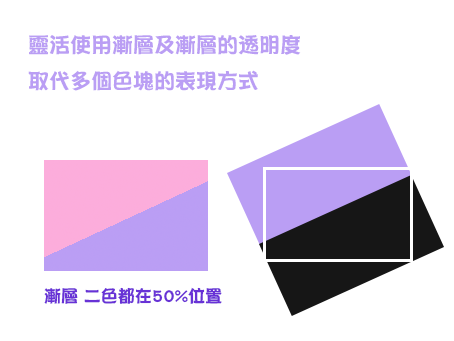
<style>
.page{position:relative;width:454px;height:341px;background:#ffffff}
.page>*{position:absolute;margin:0}
.t1{font:21px "DFPOP2-W9-WINP-BF";color:#ba9ef4}
.t2{font:17px "DFPOP2-W9-WINP-BF";color:#6832d6}
</style>
<div class="page">
<p class="t1" style="left:28px;top:35px;width:273px;height:56px">靈活使用漸層及漸層的透明度<br>取代多個色塊的表現方式</p>
<p class="t2" style="left:44px;top:287px;width:178px;height:17px">漸層 二色都在50%位置</p>
</div>
